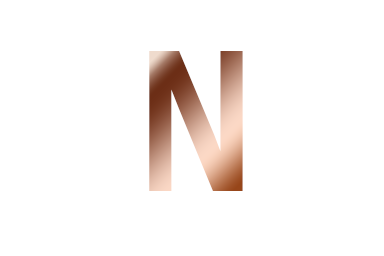
<style>
.page{position:relative;width:384px;height:256px;background:#ffffff}
.page>*{position:absolute;margin:0}
.t1{font:220px "Consolas-Bold";text-transform:uppercase;scale:0.92 1}
</style>
<div class="page">
<p class="t1" style="left:149px;top:51px;width:94px;height:140px">N</p>
</div>
